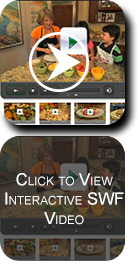
<style>
.page{position:relative;width:139px;height:271px}
.page>*{position:absolute;margin:0}
.t1{font:16.7px/19.4px "ArialMT";color:#ffffff;font-variant:small-caps}
</style>
<div class="page">
<p class="t1" style="left:5px;top:173px;width:119px;height:52px;text-align:center">Click to View Interactive SWF Video</p>
</div>
